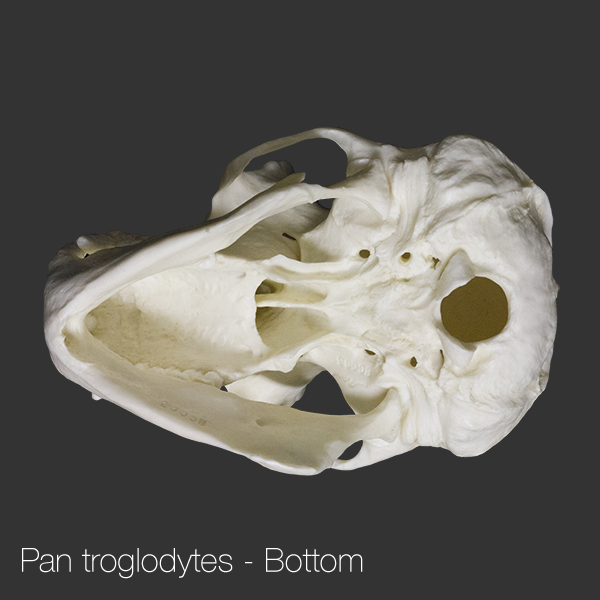
<style>
.page{position:relative;width:600px;height:600px;background:#333333}
.page>*{position:absolute;margin:0}
.t1{font:33.3px "HelveticaNeue-Thin";color:#ffffff}
</style>
<div class="page">
<p class="t1" style="left:22px;top:548px;width:341px;height:31px">Pan troglodytes - Bottom</p>
</div>
